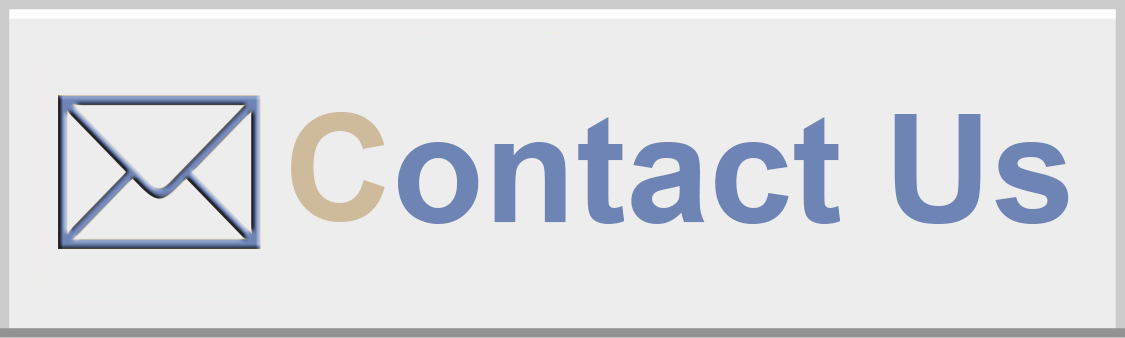
<style>
.page{position:relative;width:1125px;height:338px;background:#ededed}
.page>*{position:absolute;margin:0}
.t1{font:150px "Arial-BoldMT";color:#6e84b5}
.t2{font:150px "Arial-BoldMT";color:#cebb9b}
</style>
<div class="page">
<p class="t1" style="left:291px;top:112px;width:778px;height:112px"><span class="t2">C</span>ontact Us</p>
</div>
